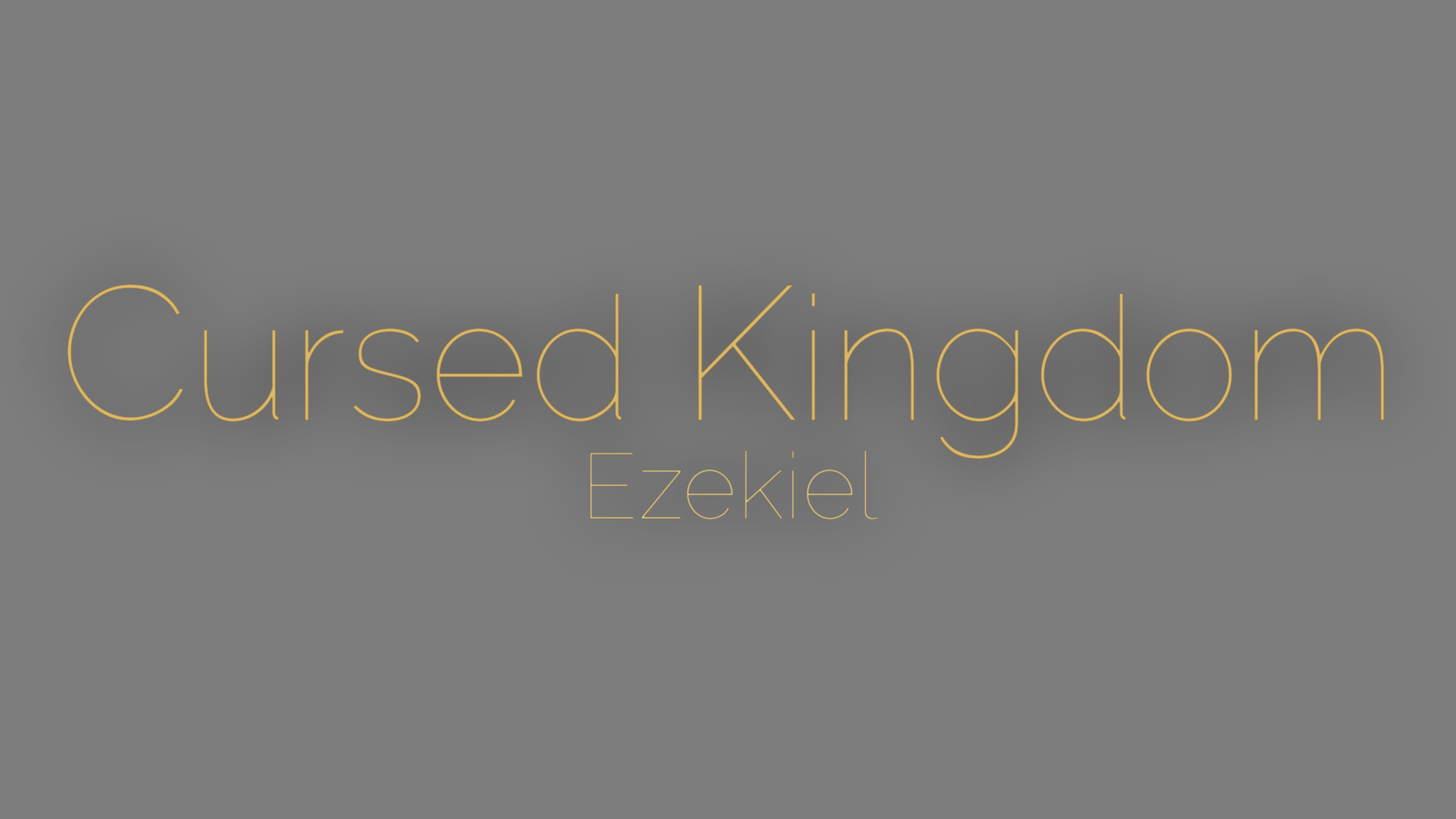
<style>
.page{position:relative;width:1456px;height:819px;background:#7d7d7d}
.page>*{position:absolute;margin:0}
.t1{font:173.9px "Raleway-Thin";color:#dbb768}
.t2{font:189.9px "Raleway-Thin";color:#dbb768}
.t3{font:93.6px "Raleway-Thin";color:#c8b37d}
</style>
<div class="page">
<p class="t1" style="left:67px;top:284px;width:1318px;height:175px"><span class="t2">C</span>ursed <span class="t2">K</span>ingdom</p>
<p class="t3" style="left:590px;top:450px;width:289px;height:69px">Ezekiel</p>
</div>
